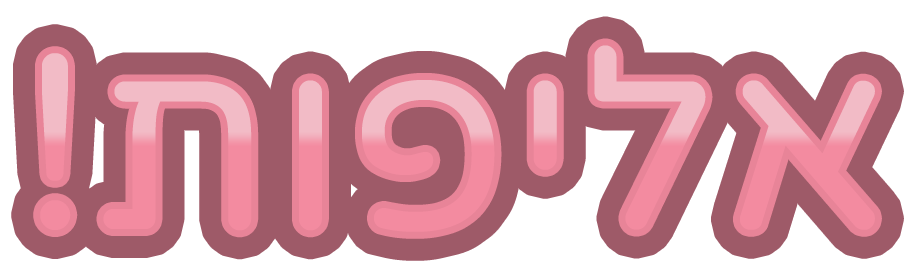
<style>
.page{position:relative;width:915px;height:276px;background:#ffffff}
.page>*{position:absolute;margin:0}
.t1{font:250px "VarelaRound-Regular";letter-spacing:0.025em}
</style>
<div class="page">
<p class="t1" style="left:40px;top:45px;width:835px;height:187px">אליפות!</p>
</div>
